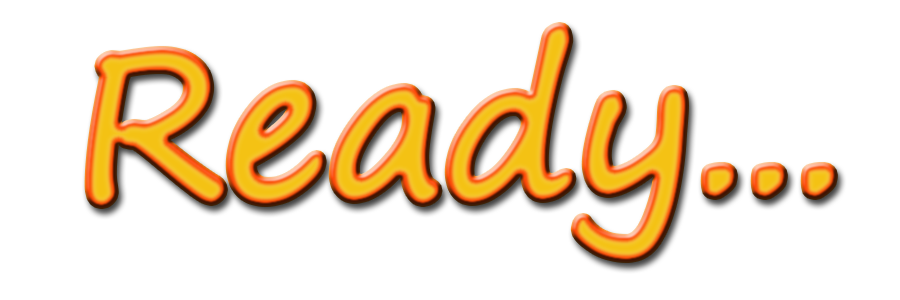
<style>
.page{position:relative;width:900px;height:300px;background:#ffffff}
.page>*{position:absolute;margin:0}
.t1{font:200px "SegoePrint";color:#f5c221}
</style>
<div class="page">
<p class="t1" style="left:91px;top:28px;width:740px;height:228px">Ready...</p>
</div>
